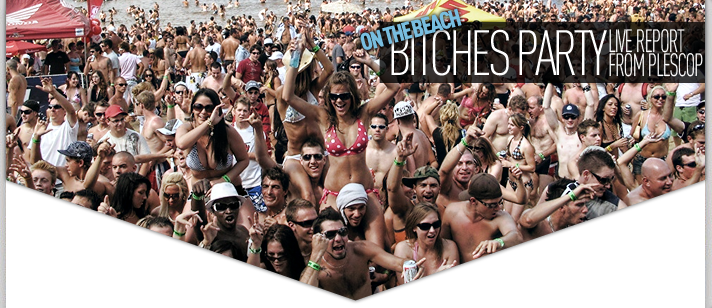
<style>
.page{position:relative;width:712px;height:308px;background:#ffffff}
.page>*{position:absolute;margin:0}
.t1{font:24px "DINOT-CondBlack";letter-spacing:-0.075em;color:#78bddf;text-transform:uppercase}
.t2{font:63px "DINOT-CondLight";letter-spacing:-0.075em;color:#ffffff;text-transform:uppercase}
.t3{font:31.7px/24px "DINOT-CondLight";letter-spacing:-0.05em;color:#ffffff;text-transform:uppercase;scale:0.76 1}
</style>
<div class="page">
<p class="t1" style="left:360px;top:8px;width:102px;height:42px;rotate:-15deg">on the beach</p>
<p class="t2" style="left:391px;top:29px;width:216px;height:47px">Bitches Party</p>
<p class="t3" style="left:609px;top:29px;width:94px;height:48px;text-align:justify">LIVE REPORT<br>FROM PLESCOP</p>
</div>
